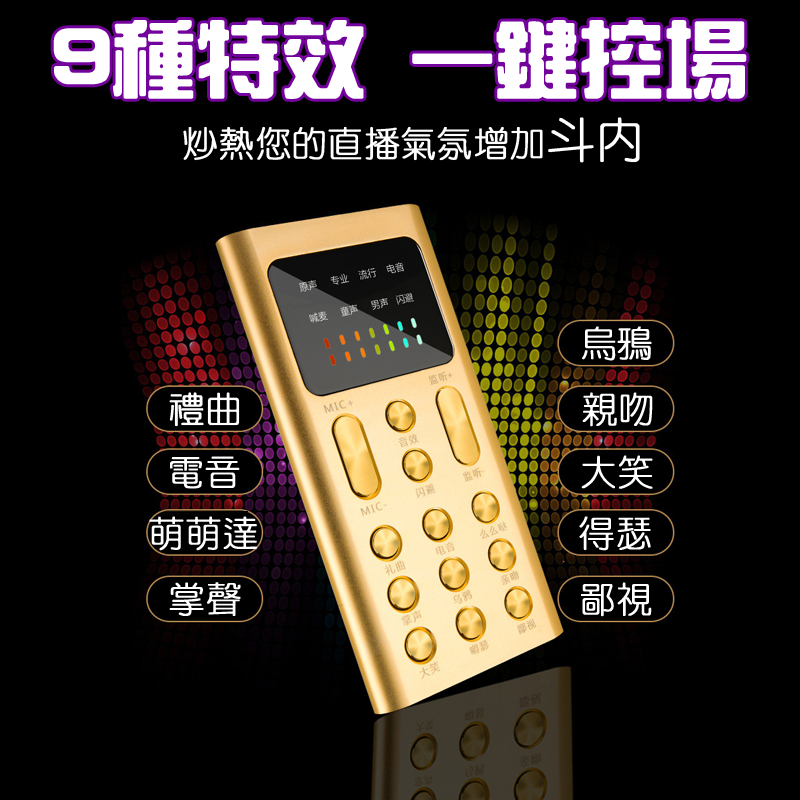
<style>
.page{position:relative;width:800px;height:800px;background:#000000}
.page>*{position:absolute;margin:0}
.t1{font:82.6px "HanWangZonYi";color:#ffffff;font-weight:bold}
.t2{font:35.4px "HanWangYenLight";color:#ffffff;font-weight:bold}
.t3{font:48px "HanWangYenLight";color:#ffffff;font-weight:bold}
.t4{font:36px "HanWangYenLight";color:#ffffff;font-weight:bold}
</style>
<div class="page">
<p class="t1" style="left:53px;top:20px;width:694px;height:79px">9種特效 一鍵控場</p>
<p class="t2" style="left:183px;top:117px;width:457px;height:46px">炒熱您的直播氣氛增加<span class="t3">斗內</span></p>
<p class="t4" style="left:582px;top:326px;width:70px;height:35px">烏鴉</p>
<p class="t4" style="left:169px;top:392px;width:71px;height:35px">禮曲</p>
<p class="t4" style="left:582px;top:392px;width:71px;height:35px">親吻</p>
<p class="t4" style="left:170px;top:456px;width:70px;height:33px">電音</p>
<p class="t4" style="left:581px;top:455px;width:72px;height:34px">大笑</p>
<p class="t4" style="left:149px;top:516px;width:108px;height:35px">萌萌達</p>
<p class="t4" style="left:579px;top:516px;width:72px;height:35px">得瑟</p>
<p class="t4" style="left:169px;top:582px;width:72px;height:34px">掌聲</p>
<p class="t4" style="left:581px;top:582px;width:71px;height:35px">鄙視</p>
</div>
